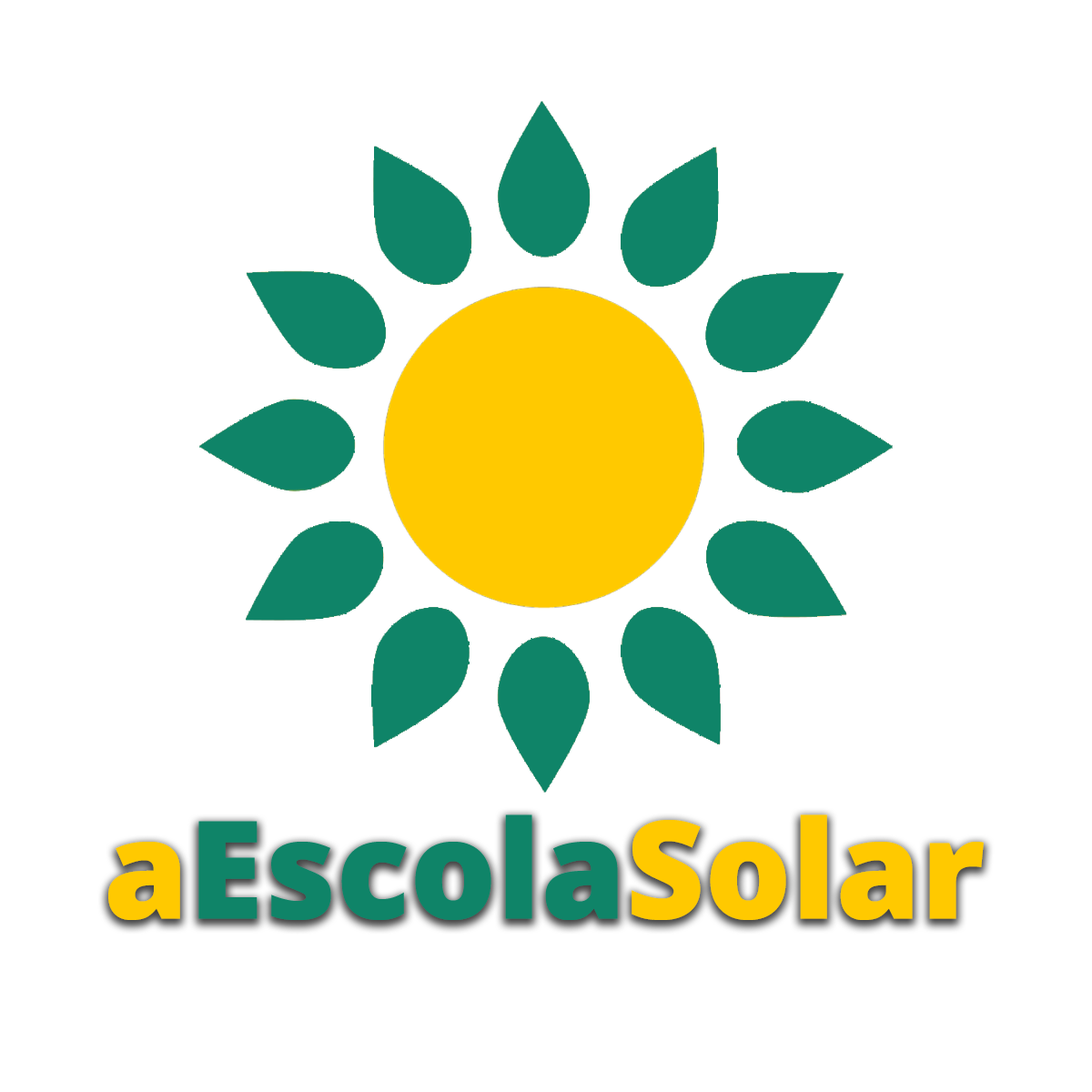
<style>
.page{position:relative;width:1092px;height:1092px;background:#ffffff}
.page>*{position:absolute;margin:0}
.t1{font:136.5px "OpenSans-Extrabold";color:#0f8468}
.t2{font:136.5px "OpenSans-Extrabold";color:#ffc900}
</style>
<div class="page">
<p class="t1" style="left:108px;top:814px;width:876px;height:106px"><span class="t2">a</span>Escola<span class="t2">Solar</span></p>
</div>
